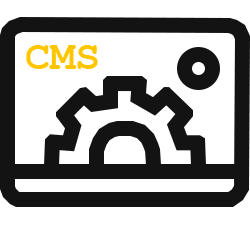
<style>
.page{position:relative;width:250px;height:250px;background:#ffffff}
.page>*{position:absolute;margin:0}
.t1{font:41.7px "CourierNewPS-BoldMT";color:#ffc600}
</style>
<div class="page">
<p class="t1" style="left:26px;top:45px;width:72px;height:24px">CMS</p>
</div>
